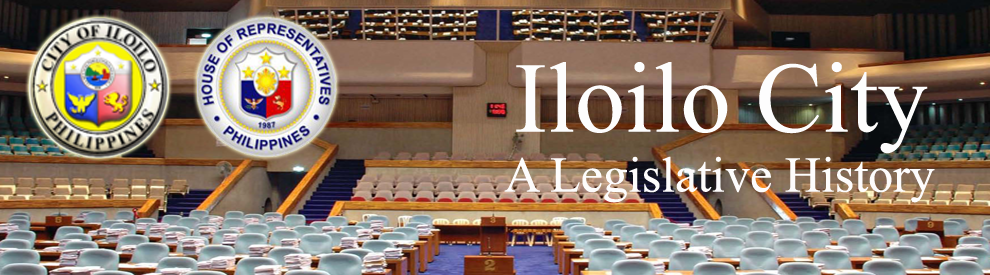
<style>
.page{position:relative;width:990px;height:275px}
.page>*{position:absolute;margin:0}
.t1{font:50px "TimesNewRomanPSMT";color:#fdfcfc}
.t2{font:100px "TimesNewRomanPSMT";color:#fdfdfd}
</style>
<div class="page">
<p class="t1" style="left:504px;top:62px;width:431px;height:141px;text-align:center"><span class="t2">Iloilo City<br></span>A Legislative History</p>
</div>
